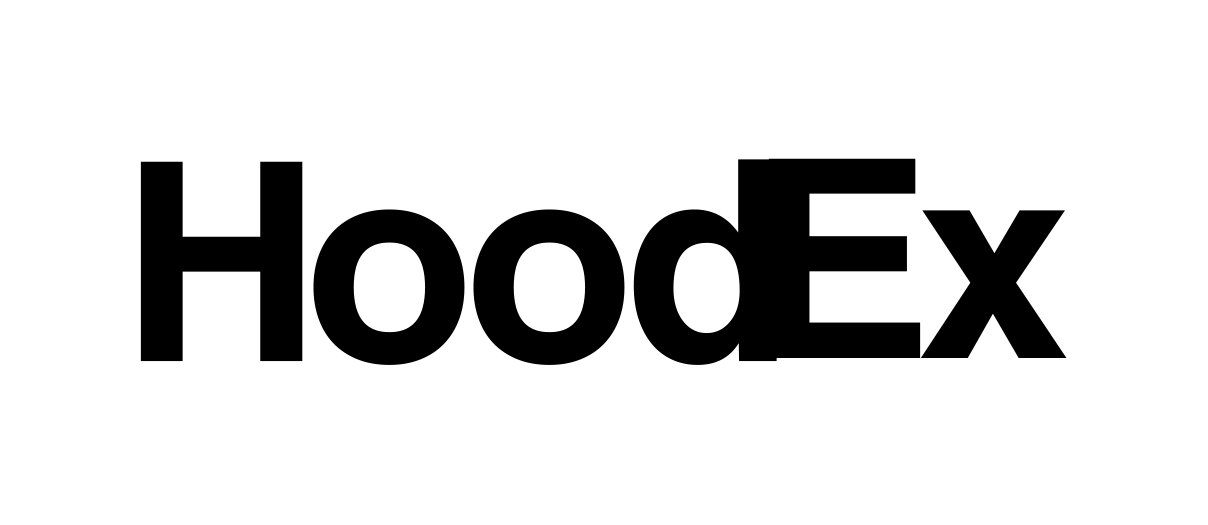
<style>
.page{position:relative;width:1208px;height:525px;background:#ffffff}
.page>*{position:absolute;margin:0}
.t1{font:300px "CoolveticaRg-Regular";color:#000000}
</style>
<div class="page">
<p class="t1" style="left:140px;top:159px;width:637px;height:206px">Hood</p>
<p class="t1" style="left:768px;top:158px;width:299px;height:200px">Ex</p>
</div>
